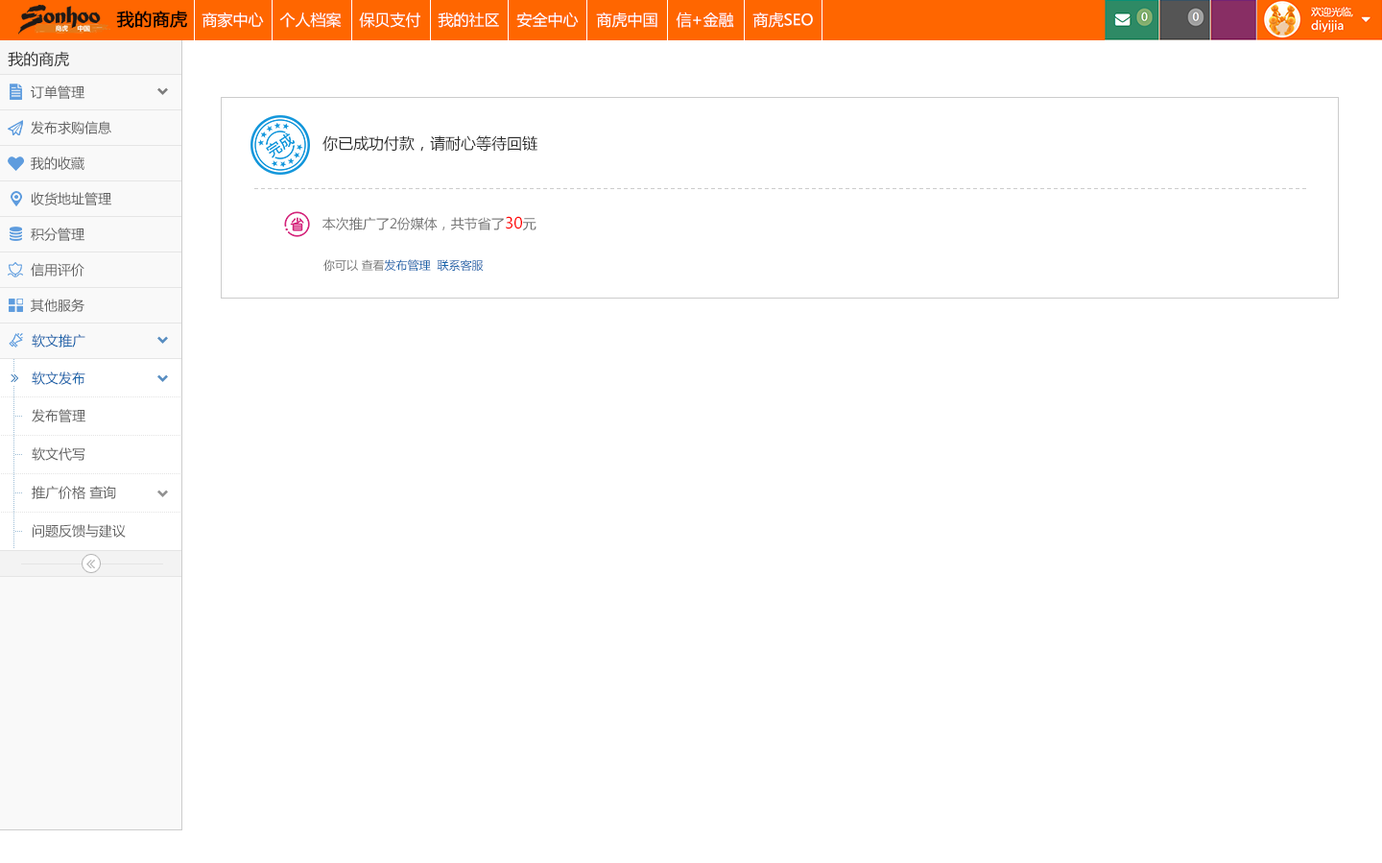
<style>
.page{position:relative;width:1382px;height:863px;background:#ffffff}
.page>*{position:absolute;margin:0}
.t1{font:17.3px "MicrosoftYaHei";color:#000000;font-weight:bold}
.t2{font:15.4px "MicrosoftYaHei";color:#ffffff}
.t3{font:15.4px "MicrosoftYaHei";color:#2d2d2d}
.t4{font:13.4px "MicrosoftYaHei";color:#616161}
.t5{font:13.4px "MicrosoftYaHei";color:#727272}
.t6{font:15.4px "MicrosoftYaHei";color:#ff0000}
.t7{font:13.4px "MicrosoftYaHei";color:#717171}
.t8{font:11.5px "MicrosoftYaHei";color:#1963aa}
.t9{font:11.5px "MicrosoftYaHei";color:#717171}
.t10{font:13.4px "MicrosoftYaHei";color:#1963aa}
.t11{font:3.8px "SimSun";color:#9dbdd6}
.t12{font:3.8px "SimSun";color:#e4e4e4}
</style>
<div class="page">
<p class="t1" style="left:116px;top:11px;width:71px;height:17px">我的商虎</p>
<p class="t2" style="left:202px;top:12px;width:62px;height:16px">商家中心</p>
<p class="t2" style="left:279px;top:12px;width:63px;height:16px">个人档案</p>
<p class="t2" style="left:359px;top:12px;width:61px;height:16px">保贝支付</p>
<p class="t2" style="left:438px;top:12px;width:61px;height:16px">我的社区</p>
<p class="t2" style="left:516px;top:12px;width:63px;height:16px">安全中心</p>
<p class="t2" style="left:596px;top:12px;width:61px;height:16px">商虎中国</p>
<p class="t2" style="left:676px;top:12px;width:58px;height:16px">信+金融</p>
<p class="t2" style="left:752px;top:12px;width:61px;height:16px">商虎SEO</p>
<p class="t3" style="left:8px;top:51px;width:61px;height:16px">我的商虎</p>
<p class="t4" style="left:31px;top:85px;width:53px;height:14px">订单管理</p>
<p class="t4" style="left:31px;top:121px;width:80px;height:13px">发布求购信息</p>
<p class="t3" style="left:322px;top:135px;width:215px;height:17px">你已成功付款，请耐心等待回链</p>
<p class="t4" style="left:31px;top:156px;width:53px;height:14px">我的收藏</p>
<p class="t4" style="left:31px;top:192px;width:80px;height:13px">收货地址管理</p>
<p class="t5" style="left:322px;top:216px;width:214px;height:14px">本次推广了2份媒体，共节省了<span class="t6">30</span><span class="t7">元</span></p>
<p class="t4" style="left:31px;top:227px;width:53px;height:14px">积分管理</p>
<p class="t4" style="left:31px;top:263px;width:53px;height:13px">信用评价</p>
<p class="t8" style="left:323px;top:259px;width:161px;height:13px"><span class="t9">你可以 查看</span>发布管理  联系客服</p>
<p class="t4" style="left:31px;top:298px;width:53px;height:14px">其他服务</p>
<p class="t10" style="left:32px;top:334px;width:53px;height:13px">软文推广</p>
<p class="t11" style="left:13px;top:359px;width:1px;height:12px">.......</p>
<p class="t10" style="left:32px;top:371px;width:53px;height:14px">软文发布</p>
<p class="t11" style="left:13px;top:386px;width:1px;height:47px">.........................</p>
<p class="t12" style="left:1px;top:396px;width:179px;height:1px">..............................................................................................</p>
<p class="t4" style="left:32px;top:409px;width:53px;height:13px">发布管理</p>
<p class="t11" style="left:13px;top:424px;width:1px;height:47px">.........................</p>
<p class="t11" style="left:13px;top:424px;width:1px;height:47px">.........................</p>
<p class="t11" style="left:15px;top:416px;width:7px;height:1px">....</p>
<p class="t12" style="left:1px;top:435px;width:179px;height:1px">..............................................................................................</p>
<p class="t4" style="left:32px;top:447px;width:53px;height:14px">软文代写</p>
<p class="t11" style="left:15px;top:454px;width:7px;height:1px">....</p>
<p class="t12" style="left:1px;top:473px;width:179px;height:1px">..............................................................................................</p>
<p class="t11" style="left:13px;top:463px;width:1px;height:47px">.........................</p>
<p class="t11" style="left:13px;top:463px;width:1px;height:47px">.........................</p>
<p class="t11" style="left:13px;top:463px;width:1px;height:47px">.........................</p>
<p class="t4" style="left:32px;top:486px;width:84px;height:13px">推广价格 查询</p>
<p class="t11" style="left:15px;top:492px;width:7px;height:1px">....</p>
<p class="t11" style="left:13px;top:501px;width:1px;height:47px">.........................</p>
<p class="t12" style="left:1px;top:512px;width:179px;height:1px">..............................................................................................</p>
<p class="t11" style="left:15px;top:531px;width:7px;height:1px">....</p>
<p class="t4" style="left:33px;top:524px;width:93px;height:13px">问题反馈与建议</p>
</div>
